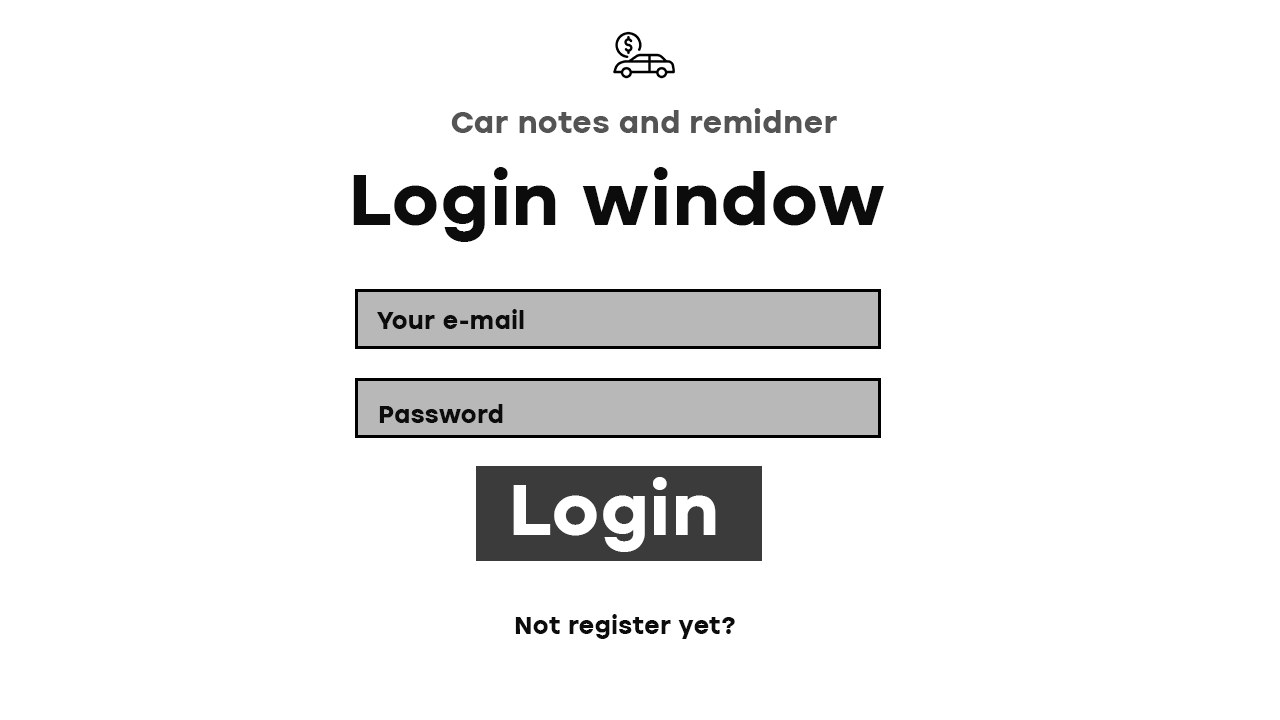
<style>
.page{position:relative;width:1280px;height:720px;background:#ffffff}
.page>*{position:absolute;margin:0}
.t1{font:30px "ICTV-Bold";color:#545454}
.t2{font:72px "ICTV-Bold";color:#0c0c0c}
.t3{font:24px "ICTV-Bold";color:#0c0c0c}
.t4{font:72px "ICTV-Bold";color:#ffffff}
</style>
<div class="page">
<p class="t1" style="left:451px;top:108px;width:386px;height:25px">Car notes and remidner</p>
<p class="t2" style="left:353px;top:167px;width:531px;height:75px">Login window</p>
<p class="t3" style="left:377px;top:309px;width:147px;height:20px">Your e-mail</p>
<p class="t3" style="left:379px;top:404px;width:124px;height:19px">Password</p>
<p class="t4" style="left:513px;top:477px;width:203px;height:75px">Login</p>
<p class="t3" style="left:515px;top:614px;width:220px;height:25px">Not register yet?</p>
</div>
